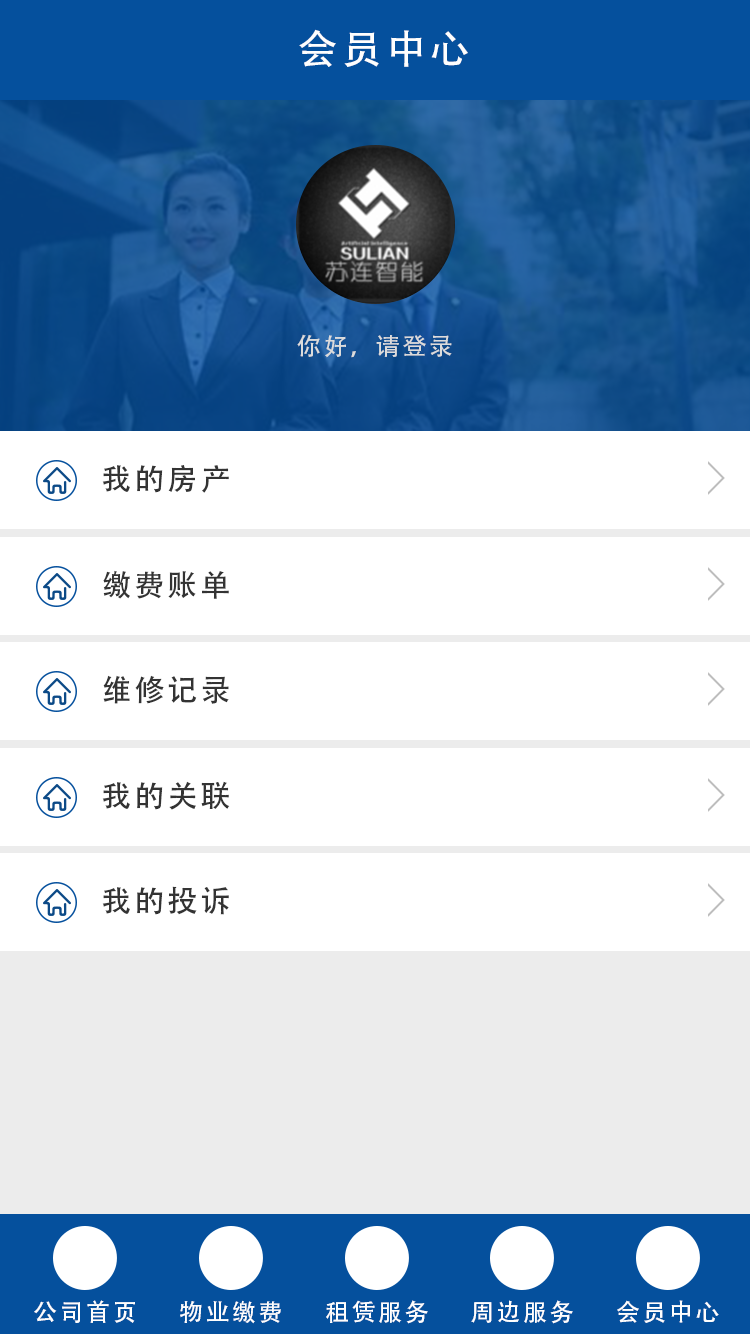
<style>
.page{position:relative;width:750px;height:1334px;background:#ffffff}
.page>*{position:absolute;margin:0}
.t1{font:40px "AdobeHeitiStd-Regular";letter-spacing:0.1em;color:#fefefe;text-transform:uppercase}
.t2{font:24px "AdobeHeitiStd-Regular";letter-spacing:0.1em;color:#dcdcdc;text-transform:uppercase}
.t3{font:30px "AdobeHeitiStd-Regular";letter-spacing:0.1em;color:#333333;text-transform:uppercase}
.t4{font:24px "AdobeHeitiStd-Regular";letter-spacing:0.1em;color:#fefefe;text-transform:uppercase}
</style>
<div class="page">
<p class="t1" style="left:299px;top:29px;width:169px;height:38px">会员中心</p>
<p class="t2" style="left:297px;top:334px;width:155px;height:24px">你好，请登录</p>
<p class="t3" style="left:102px;top:465px;width:127px;height:28px">我的房产</p>
<p class="t3" style="left:103px;top:570px;width:126px;height:29px">缴费账单</p>
<p class="t3" style="left:103px;top:675px;width:126px;height:29px">维修记录</p>
<p class="t3" style="left:102px;top:781px;width:128px;height:29px">我的关联</p>
<p class="t3" style="left:102px;top:886px;width:127px;height:29px">我的投诉</p>
<p class="t4" style="left:34px;top:1300px;width:101px;height:23px">公司首页</p>
<p class="t4" style="left:180px;top:1300px;width:101px;height:24px">物业缴费</p>
<p class="t4" style="left:326px;top:1300px;width:102px;height:24px">租赁服务</p>
<p class="t4" style="left:471px;top:1300px;width:102px;height:24px">周边服务</p>
<p class="t4" style="left:617px;top:1300px;width:102px;height:23px">会员中心</p>
</div>
